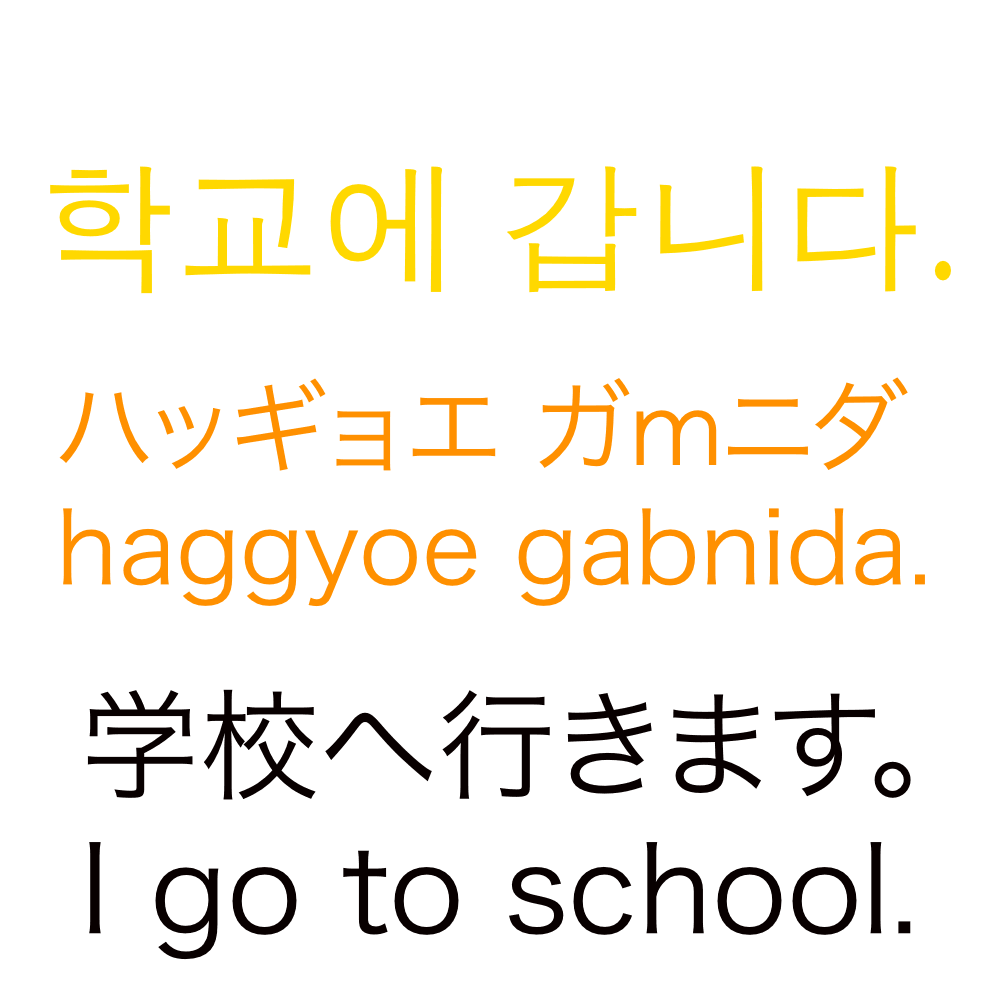
<style>
.page{position:relative;width:1000px;height:1000px;background:#ffffff}
.page>*{position:absolute;margin:0}
.t1{font:140px "AppleGothic";color:#ffd800}
.t2{font:100px "HiraKakuProN-W3";color:#ff9000}
.t3{font:100px "AppleGothic";color:#ff9000}
.t4{font:120px "HiraKakuProN-W3";color:#080000}
</style>
<div class="page">
<p class="t1" style="left:50px;top:166px;width:901px;height:128px">학교에 갑니다.</p>
<p class="t2" style="left:59px;top:377px;width:866px;height:230px">ハッギョエ ガ<span class="t3"> m</span>ニダ<br>haggyoe gabnida.</p>
<p class="t4" style="left:87px;top:689px;width:824px;height:271px">学校へ行きます。<br>I go to school.</p>
</div>
